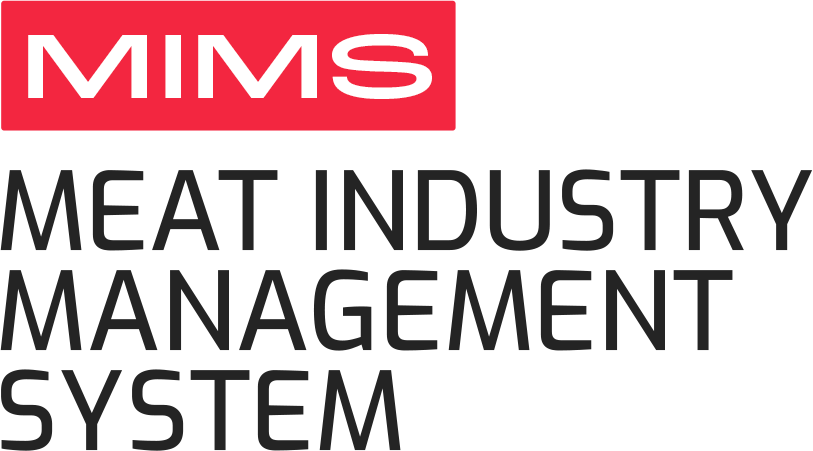
<style>
.page{position:relative;width:813px;height:451px;background:#ffffff}
.page>*{position:absolute;margin:0}
.t1{font:95.7px "RocGrotesk-ExtraWideMedium";color:#ffffff}
.t2{font:108.4px/100px "ExoRoman-Medium";color:#242424}
</style>
<div class="page">
<p class="t1" style="left:28px;top:34px;width:404px;height:65px">MIMS</p>
<p class="t2" style="left:0px;top:169px;width:813px;height:282px">MEAT INDUSTRY<br>MANAGEMENT<br>SYSTEM</p>
</div>
